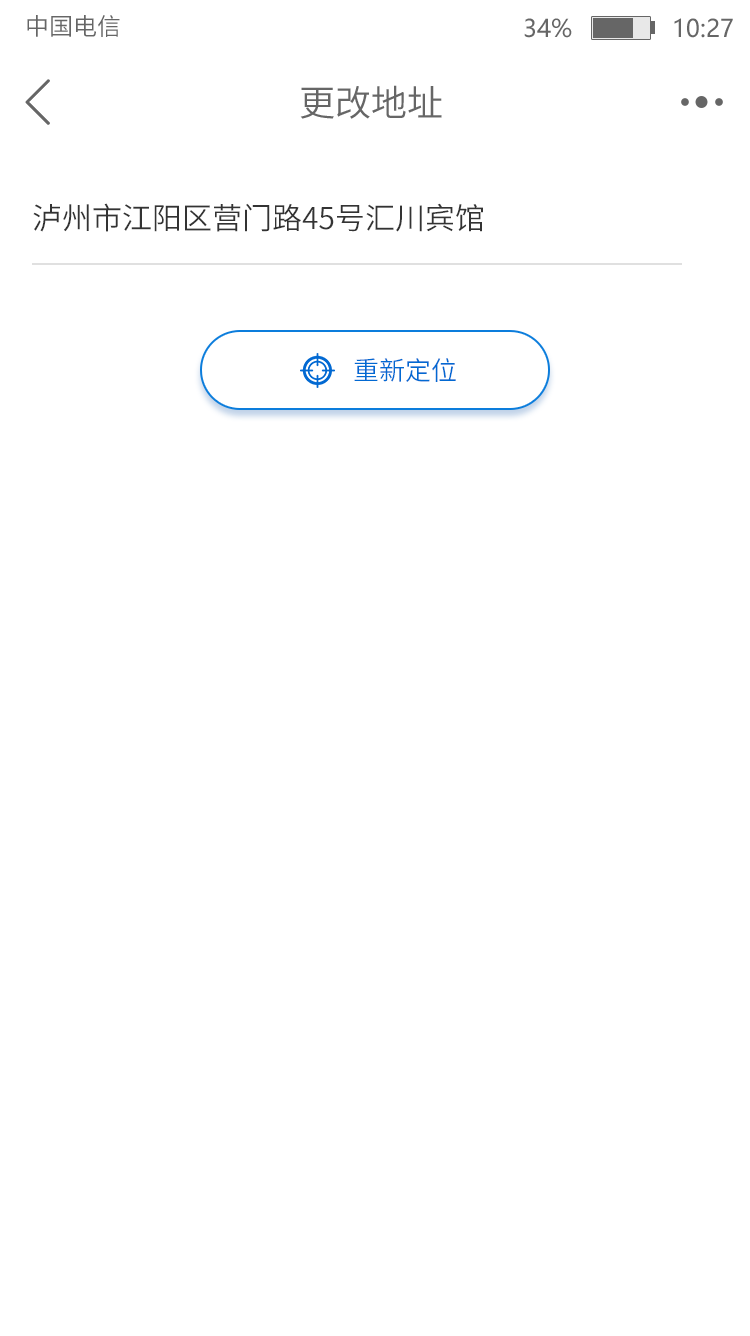
<style>
.page{position:relative;width:750px;height:1336px;background:#ffffff}
.page>*{position:absolute;margin:0}
.t1{font:24px "SourceHanSansCN-Normal";color:#666666}
.t2{font:24px "MicrosoftYaHei";color:#666666}
.t3{font:36px "SourceHanSansCN-Normal";color:#666666}
.t4{font:30px "SourceHanSansCN-Normal";color:#333333}
.t5{font:26px "SourceHanSansCN-Normal";color:#0269d2}
</style>
<div class="page">
<p class="t1" style="left:27px;top:15px;width:93px;height:22px">中国电信</p>
<p class="t2" style="left:524px;top:18px;width:209px;height:20px">34%              10:27</p>
<p class="t3" style="left:300px;top:85px;width:142px;height:34px">更改地址</p>
<p class="t4" style="left:33px;top:203px;width:450px;height:29px">泸州市江阳区营门路45号汇川宾馆</p>
<p class="t5" style="left:354px;top:358px;width:102px;height:24px">重新定位</p>
</div>
